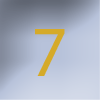
<style>
.page{position:relative;width:100px;height:100px}
.page>*{position:absolute;margin:0}
.t1{font:72px "MyriadPro-Regular";color:#d5aa29}
</style>
<div class="page">
<p class="t1" style="left:35px;top:29px;width:30px;height:47px">7</p>
</div>
